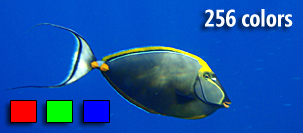
<style>
.page{position:relative;width:303px;height:133px}
.page>*{position:absolute;margin:0}
.t1{font:23.6px "SegoeCondensed-Bold";color:#ffffff}
</style>
<div class="page">
<p class="t1" style="left:205px;top:9px;width:88px;height:18px">256 colors</p>
</div>
